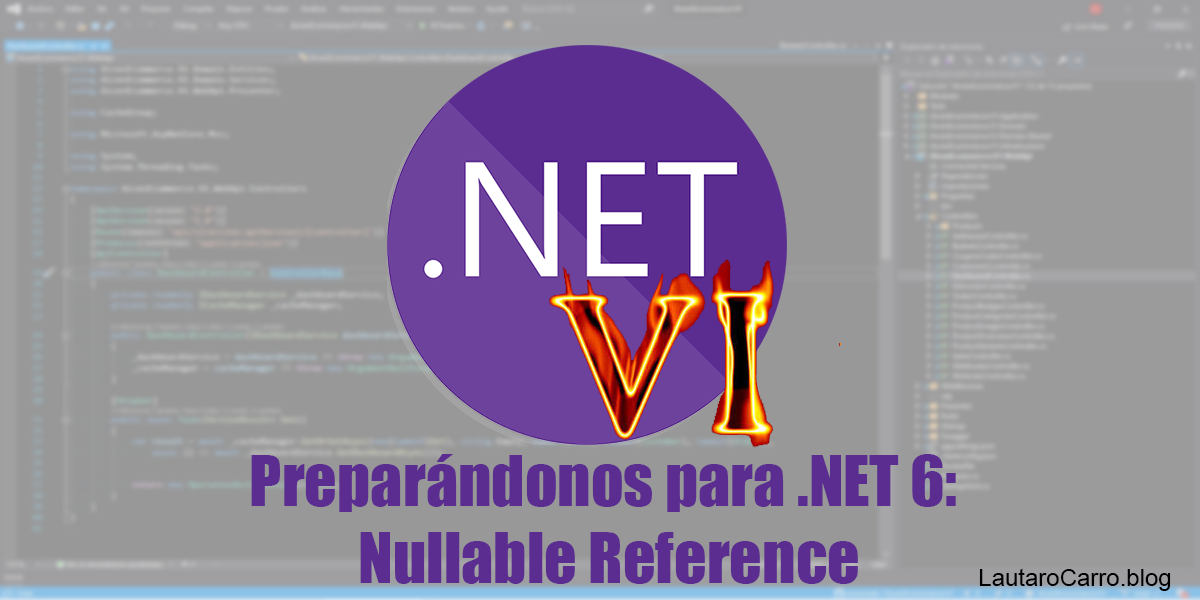
<style>
.page{position:relative;width:1200px;height:600px;background:#989898}
.page>*{position:absolute;margin:0}
.t1{font:64px "Impact";color:#5c2d91}
.t2{font:24px "ArialMT";color:#000000}
</style>
<div class="page">
<p class="t1" style="left:251px;top:454px;width:705px;height:130px;text-align:center">Preparándonos para .NET 6: <br>Nullable Reference</p>
<p class="t2" style="left:979px;top:568px;width:192px;height:23px">LautaroCarro.blog</p>
</div>
